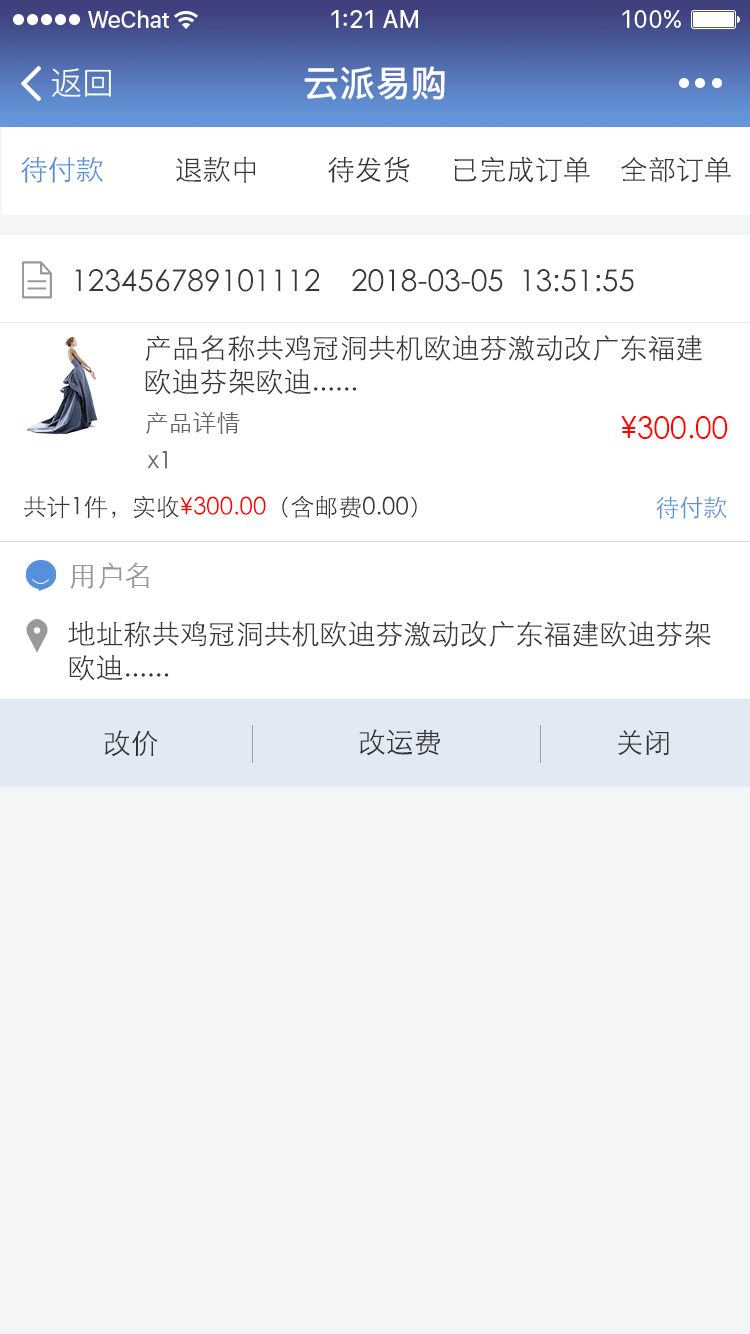
<style>
.page{position:relative;width:750px;height:1334px;background:#f4f5f6}
.page>*{position:absolute;margin:0}
.t1{font:32px "PingFang-SC-Regular";color:#ffffff}
.t2{font:36px "PingFang-SC-Bold";color:#ffffff}
.t3{font:28px "STXihei";color:#568fdc}
.t4{font:28px "STXihei";color:#373737}
.t5{font:28px "STXihei";color:#333333}
.t6{font:30px "STXihei";color:#373737}
.t7{font:24px "STXihei";color:#666666}
.t8{font:30px "STXihei";color:#ff0000}
.t9{font:24px "STXihei";color:#373737}
.t10{font:24px "STXihei";color:#ff0000}
.t11{font:24px "STXihei";color:#568fdc}
.t12{font:28px "STXihei";color:#999999}
</style>
<div class="page">
<p class="t1" style="left:52px;top:68px;width:59px;height:29px">返回</p>
<p class="t2" style="left:304px;top:66px;width:141px;height:34px">云派易购</p>
<p class="t3" style="left:21px;top:156px;width:82px;height:27px">待付款</p>
<p class="t4" style="left:176px;top:156px;width:80px;height:27px">退款中</p>
<p class="t5" style="left:328px;top:156px;width:82px;height:27px">待发货</p>
<p class="t4" style="left:454px;top:156px;width:136px;height:27px">已完成订单</p>
<p class="t4" style="left:621px;top:157px;width:110px;height:26px">全部订单</p>
<p class="t6" style="left:75px;top:269px;width:245px;height:23px">123456789101112</p>
<p class="t6" style="left:352px;top:269px;width:282px;height:23px">2018-03-05  13:51:55</p>
<p class="t4" style="left:145px;top:335px;width:557px;height:60px">产品名称共鸡冠洞共机欧迪芬激动改广东福建欧迪芬架欧迪......</p>
<p class="t7" style="left:146px;top:412px;width:94px;height:22px">产品详情</p>
<p class="t8" style="left:621px;top:416px;width:107px;height:23px">¥300.00</p>
<p class="t7" style="left:147px;top:451px;width:20px;height:18px">x1</p>
<p class="t9" style="left:24px;top:495px;width:393px;height:24px">共计1件，实收<span class="t10">¥300.00</span>（含邮费0.00）</p>
<p class="t11" style="left:656px;top:496px;width:71px;height:23px">待付款</p>
<p class="t12" style="left:70px;top:562px;width:79px;height:27px">用户名</p>
<p class="t4" style="left:68px;top:621px;width:643px;height:60px">地址称共鸡冠洞共机欧迪芬激动改广东福建欧迪芬架欧迪......</p>
<p class="t5" style="left:104px;top:730px;width:54px;height:27px">改价</p>
<p class="t5" style="left:359px;top:729px;width:82px;height:27px">改运费</p>
<p class="t5" style="left:618px;top:730px;width:51px;height:26px">关闭</p>
</div>
